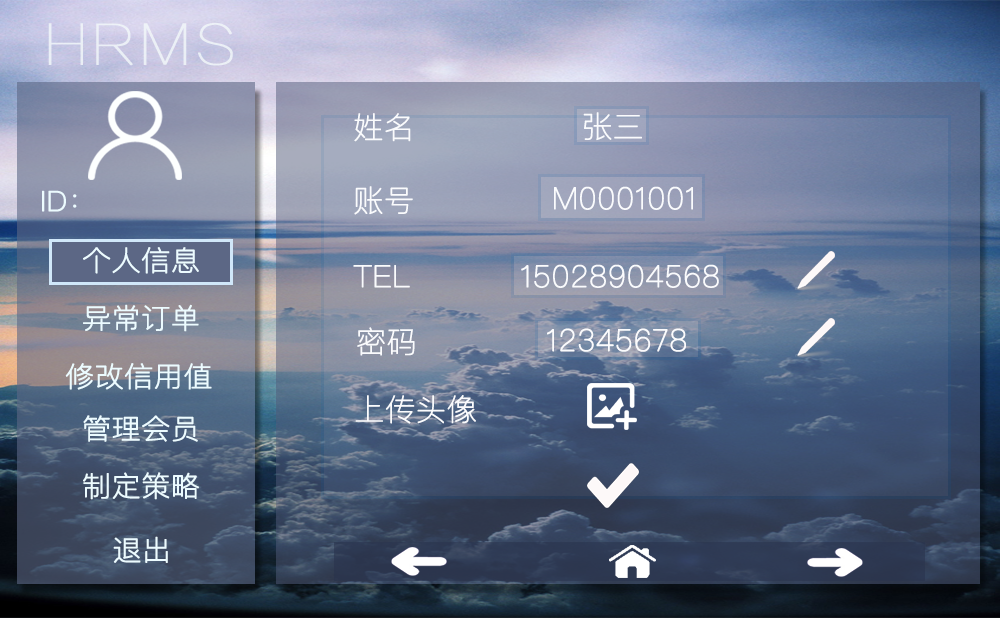
<style>
.page{position:relative;width:1000px;height:618px}
.page>*{position:absolute;margin:0}
.t1{font:30px "PingFangSC-Ultralight";color:#fafbfd;font-weight:bold}
.t2{font:27.8px "PingFangSC-Thin";color:#ecfbff;font-weight:bold;scale:1.04 1}
</style>
<div class="page">
<p class="t1" style="left:354px;top:113px;width:57px;height:29px">姓名</p>
<p class="t1" style="left:583px;top:112px;width:59px;height:29px">张三</p>
<p class="t2" style="left:42px;top:190px;width:35px;height:22px">ID：</p>
<p class="t1" style="left:354px;top:186px;width:59px;height:29px">账号</p>
<p class="t1" style="left:554px;top:186px;width:139px;height:24px">M0001001</p>
<p class="t2" style="left:83px;top:247px;width:116px;height:27px">个人信息</p>
<p class="t1" style="left:353px;top:265px;width:57px;height:23px">TEL</p>
<p class="t1" style="left:521px;top:264px;width:198px;height:24px">15028904568</p>
<p class="t2" style="left:83px;top:304px;width:116px;height:28px">异常订单</p>
<p class="t1" style="left:357px;top:327px;width:58px;height:29px">密码</p>
<p class="t1" style="left:547px;top:328px;width:139px;height:24px">12345678</p>
<p class="t2" style="left:65px;top:363px;width:147px;height:27px">修改信用值</p>
<p class="t1" style="left:355px;top:395px;width:121px;height:29px">上传头像</p>
<p class="t2" style="left:83px;top:415px;width:115px;height:27px">管理会员</p>
<p class="t2" style="left:83px;top:472px;width:116px;height:28px">制定策略</p>
<p class="t2" style="left:113px;top:536px;width:55px;height:27px">退出</p>
</div>
